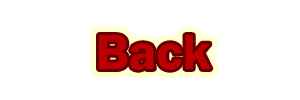
<style>
.page{position:relative;width:300px;height:100px;background:#ffffff}
.page>*{position:absolute;margin:0}
.t1{font:50.7px "FranklinGothic-Demi";color:#ba0000}
</style>
<div class="page">
<p class="t1" style="left:99px;top:35px;width:112px;height:35px">Back</p>
</div>
